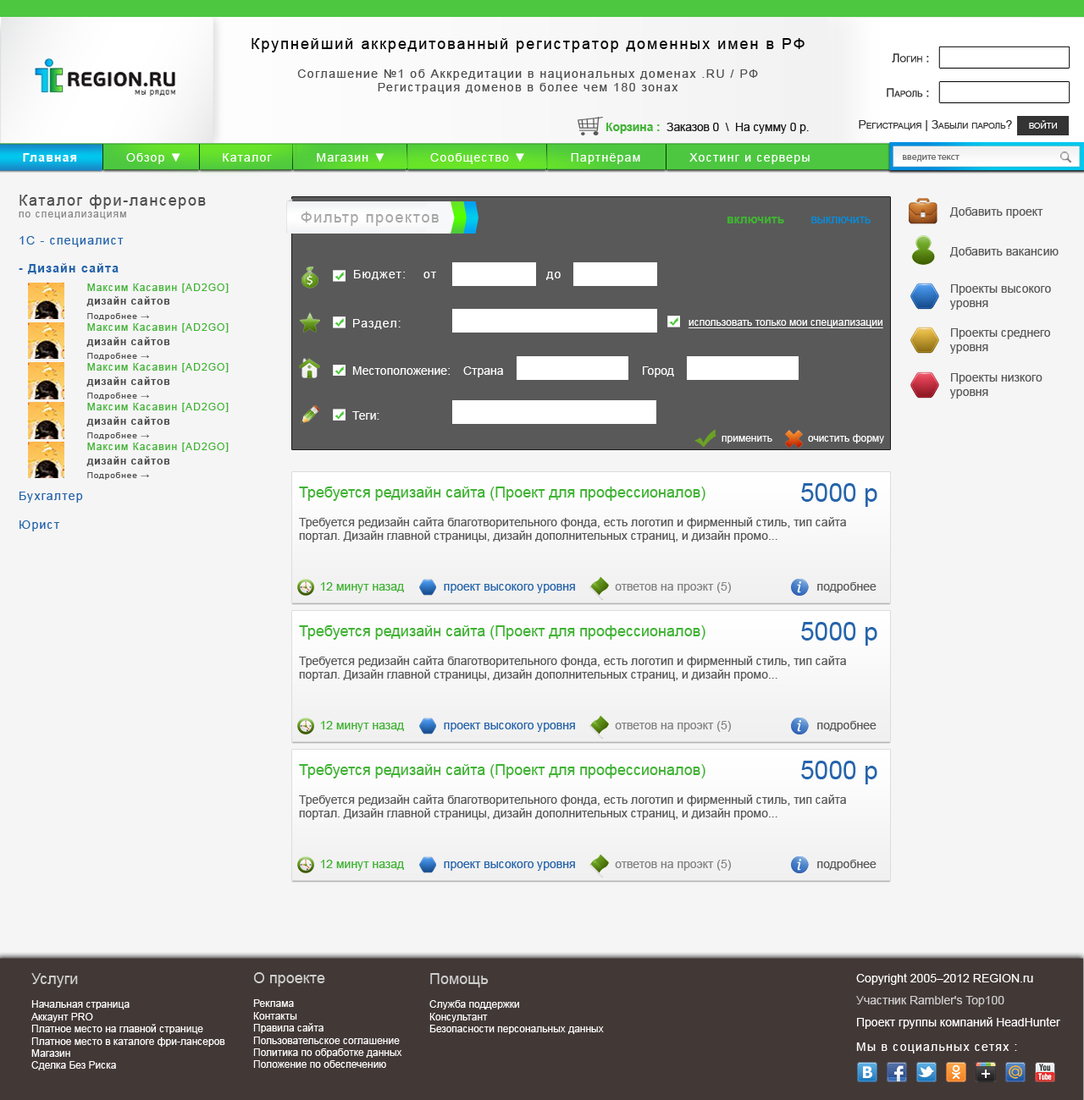
<style>
.page{position:relative;width:1084px;height:1100px;background:#f5f5f5}
.page>*{position:absolute;margin:0}
.t1{font:11.9px "ArialMT";letter-spacing:0.11em;color:#4e4e4e}
.t2{font:15.2px "ArialMT";letter-spacing:0.11em;color:#090708}
.t3{font:11.9px/17.4px "ArialMT";color:#343434;font-variant:small-caps}
.t4{font:11.9px "ArialMT";letter-spacing:-0.01em;color:#191718}
.t5{font:11.9px "Arial-BoldMT";letter-spacing:-0.01em;color:#40b234}
.t6{font:11.9px "ArialMT";color:#343434;font-variant:small-caps}
.t7{font:11.9px "ArialMT";color:#ffffff;font-variant:small-caps}
.t8{font:11.9px "ArialMT";letter-spacing:0.09em;color:#ffffff}
.t9{font:11.9px "Arial-BoldMT";letter-spacing:0.09em;color:#ffffff}
.t10{font:9.6px "MyriadPro-Regular";color:#747474}
.t11{font:15.2px "ArialMT";letter-spacing:0.09em;color:#4e4e4e}
.t12{font:10.2px "ArialMT";letter-spacing:0.09em;color:#898989}
.t13{font:11.9px "ArialMT";letter-spacing:0.09em;color:#2664ab}
.t14{font:11.9px "Arial-BoldMT";letter-spacing:0.09em;color:#2664ab}
.t15{font:11.9px "ArialMT";color:#595959}
.t16{font:15.2px "ArialMT";letter-spacing:0.09em;color:#a7a7a7}
.t17{font:11.9px "ArialMT";color:#028ee1}
.t18{font:11.9px "Arial-BoldMT";color:#40b234}
.t19{font:10.2px/14.1px "ArialMT";letter-spacing:0.09em;color:#40b234}
.t20{font:10px/14.1px "Arial-BoldMT";letter-spacing:0.09em;color:#4e4e4e}
.t21{font:8.5px/14.1px "ArialMT";letter-spacing:0.09em;color:#4e4e4e}
.t22{font:10.2px "ArialMT";color:#ffffff;text-decoration:underline}
.t23{font:11.9px "ArialMT";color:#ffffff}
.t24{font:10.2px "ArialMT";color:#ffffff}
.t25{font:25.4px "ArialMT";color:#2664ab}
.t26{font:15.2px "ArialMT";color:#40b234}
.t27{font:11.9px "ArialMT";color:#2664ab}
.t28{font:11.9px "ArialMT";color:#40b234}
.t29{font:11.9px "ArialMT";color:#828282}
.t30{font:15.2px "ArialMT";color:#cecece}
.t31{font:11.9px/22px "ArialMT";color:#ffffff}
.t32{font:11.9px/22px "ArialMT";color:#cecece}
</style>
<div class="page">
<p class="t1" style="left:251px;top:38px;width:553px;height:56px;text-align:center"><span class="t2">Крупнейший аккредитованный регистратор доменных имен в РФ<br></span><br>Соглашение №1 об Аккредитации в национальных доменах .RU / РФ<br>Регистрация доменов в более чем 180 зонах</p>
<p class="t3" style="left:886px;top:53px;width:43px;height:44px;text-align:right">Логин :<br><br>Пароль :</p>
<p class="t4" style="left:606px;top:123px;width:202px;height:11px"><span class="t5">Корзина :  </span>Заказов 0  \  На сумму 0 р.</p>
<p class="t6" style="left:858px;top:120px;width:198px;height:11px">Регистрация | Забыли пароль?  <span class="t7">   войти</span></p>
<p class="t8" style="left:23px;top:153px;width:786px;height:11px"><span class="t9">Главная</span>           Обзор ▼         Каталог          Магазин ▼          Сообщество ▼          Партнёрам           Хостинг и серверы</p>
<p class="t10" style="left:902px;top:155px;width:57px;height:7px">введите текст</p>
<p class="t11" style="left:19px;top:195px;width:187px;height:337px">Каталог фри-лансеров<br><span class="t12">по специализациям<br><br></span><span class="t13">1С - специалист<br></span><span class="t14"> <br>- Дизайн сайта<br></span><span class="t13"><br><br><br><br><br><br><br><br><br><br><br><br><br><br><br>Бухгалтер<br><br>Юрист</span></p>
<p class="t15" style="left:949px;top:207px;width:94px;height:11px">Добавить проект</p>
<p class="t16" style="left:301px;top:212px;width:138px;height:14px">Фильтр проектов</p>
<p class="t17" style="left:726px;top:217px;width:144px;height:6px"><span class="t18">включить        </span>выключить</p>
<p class="t15" style="left:949px;top:247px;width:109px;height:10px">Добавить вакансию</p>
<p class="t8" style="left:354px;top:270px;width:51px;height:10px">Бюджет:</p>
<p class="t19" style="left:86px;top:284px;width:143px;height:37px">Максим Касавин [AD2GO] <br><span class="t20">дизайн сайтов<br></span><span class="t21">Подробнее →</span></p>
<p class="t15" style="left:949px;top:284px;width:102px;height:26px">Проекты высокого<br>уровня</p>
<p class="t19" style="left:86px;top:323px;width:143px;height:38px">Максим Касавин [AD2GO] <br><span class="t20">дизайн сайтов<br></span><span class="t21">Подробнее →</span></p>
<p class="t8" style="left:353px;top:319px;width:47px;height:10px">Раздел:</p>
<p class="t22" style="left:688px;top:320px;width:195px;height:8px">использовать только мои специализации</p>
<p class="t15" style="left:949px;top:328px;width:101px;height:26px">Проекты среднего<br>уровня</p>
<p class="t19" style="left:86px;top:363px;width:143px;height:37px">Максим Касавин [AD2GO] <br><span class="t20">дизайн сайтов <br></span><span class="t21">Подробнее →</span></p>
<p class="t23" style="left:352px;top:367px;width:98px;height:8px">Местоположение:</p>
<p class="t15" style="left:949px;top:373px;width:93px;height:26px">Проекты низкого<br>уровня</p>
<p class="t19" style="left:86px;top:403px;width:143px;height:37px">Максим Касавин [AD2GO] <br><span class="t20">дизайн сайтов<br></span><span class="t21">Подробнее →</span></p>
<p class="t23" style="left:352px;top:411px;width:27px;height:9px">Теги:</p>
<p class="t24" style="left:721px;top:436px;width:51px;height:8px">применить</p>
<p class="t24" style="left:808px;top:434px;width:76px;height:10px">очистить форму</p>
<p class="t19" style="left:86px;top:443px;width:143px;height:37px">Максим Касавин [AD2GO] <br><span class="t20">дизайн сайтов<br></span><span class="t21">Подробнее →</span></p>
<p class="t25" style="left:801px;top:483px;width:76px;height:24px">5000 р</p>
<p class="t15" style="left:299px;top:487px;width:547px;height:56px"><span class="t26">Требуется редизайн сайта (Проект для профессионалов) <br></span><br>Требуется редизайн сайта благотворительного фонда, есть логотип и фирменный стиль, тип сайта <br>портал. Дизайн главной страницы, дизайн дополнительных страниц, и дизайн промо...</p>
<p class="t27" style="left:320px;top:582px;width:556px;height:11px"><span class="t28">12 минут назад            </span>проект высокого уровня            <span class="t29">ответов на проэкт (5)                          </span><span class="t15">подробнее</span></p>
<p class="t15" style="left:299px;top:626px;width:547px;height:55px"><span class="t26">Требуется редизайн сайта (Проект для профессионалов) <br></span><br>Требуется редизайн сайта благотворительного фонда, есть логотип и фирменный стиль, тип сайта <br>портал. Дизайн главной страницы, дизайн дополнительных страниц, и дизайн промо...</p>
<p class="t25" style="left:801px;top:622px;width:76px;height:24px">5000 р</p>
<p class="t27" style="left:320px;top:721px;width:556px;height:11px"><span class="t28">12 минут назад            </span>проект высокого уровня            <span class="t29">ответов на проэкт (5)                          </span><span class="t15">подробнее</span></p>
<p class="t25" style="left:801px;top:761px;width:76px;height:24px">5000 р</p>
<p class="t15" style="left:299px;top:764px;width:547px;height:56px"><span class="t26">Требуется редизайн сайта (Проект для профессионалов) <br></span><br>Требуется редизайн сайта благотворительного фонда, есть логотип и фирменный стиль, тип сайта <br>портал. Дизайн главной страницы, дизайн дополнительных страниц, и дизайн промо...</p>
<p class="t27" style="left:320px;top:860px;width:556px;height:11px"><span class="t28">12 минут назад            </span>проект высокого уровня            <span class="t29">ответов на проэкт (5)                          </span><span class="t15">подробнее</span></p>
<p class="t24" style="left:31px;top:974px;width:194px;height:97px"><span class="t30">Услуги<br></span><br>Начальная страница<br>Аккаунт PRO<br>Платное место на главной странице<br>Платное место в каталоге фри-лансеров<br>Магазин<br>Сделка Без Риска</p>
<p class="t24" style="left:253px;top:973px;width:149px;height:95px"><span class="t30">О проекте<br></span><br>Реклама<br>Контакты<br>Правила сайта<br>Пользовательское соглашение<br>Политика по обработке данных<br>Положение по обеспечению</p>
<p class="t24" style="left:429px;top:974px;width:175px;height:60px"><span class="t30">Помощь<br></span><br>Служба поддержки<br>Консультант<br>Безопасности персональных данных</p>
<p class="t31" style="left:856px;top:974px;width:204px;height:55px">Copyright 2005–2012 REGION.ru<br><span class="t32">Участник Rambler's Top100 <br></span>Проект группы компаний HeadHunter</p>
<p class="t8" style="left:856px;top:1043px;width:161px;height:11px">Мы в социальных сетях :</p>
</div>
